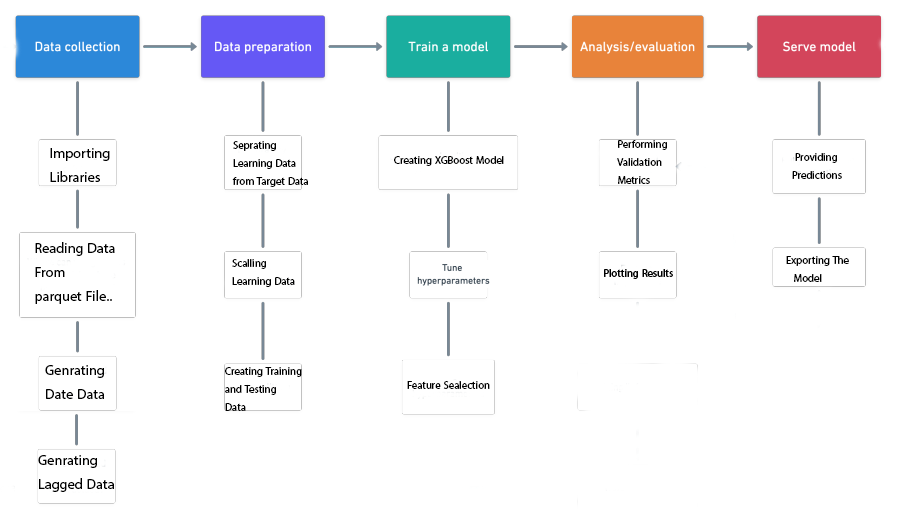
<style>
.page{position:relative;width:906px;height:520px;background:#ffffff}
.page>*{position:absolute;margin:0}
.t1{font:20px "MyriadArabic-Regular";color:#000000}
.t2{font:15px "MyriadArabic-Regular";color:#000000}
</style>
<div class="page">
<p class="t1" style="left:50px;top:148px;width:60px;height:34px;text-align:right">Importing<br>Libraries</p>
<p class="t2" style="left:232px;top:141px;width:76px;height:46px;text-align:right">Seprating<br> Learning Data<br> from Target Data</p>
<p class="t2" style="left:617px;top:140px;width:50px;height:44px;text-align:right">Performing<br>Validation<br>Metrics</p>
<p class="t2" style="left:394px;top:156px;width:110px;height:10px">Creating XGBoost Model</p>
<p class="t2" style="left:792px;top:153px;width:50px;height:26px;text-align:right">Providing <br>Predictions</p>
<p class="t1" style="left:35px;top:242px;width:80px;height:62px;text-align:right">Reading Data<br> From<br> ..parquet File</p>
<p class="t2" style="left:786px;top:256px;width:63px;height:26px;text-align:right">Exporting The<br>Model</p>
<p class="t2" style="left:232px;top:259px;width:63px;height:28px;text-align:right">Scalling<br>Learning Data</p>
<p class="t1" style="left:45px;top:365px;width:59px;height:34px;text-align:right">Genrating<br>Date Data</p>
<p class="t2" style="left:225px;top:367px;width:77px;height:44px;text-align:right">Creating Training<br>and Testing<br>Data</p>
<p class="t2" style="left:407px;top:381px;width:83px;height:8px">Feature Sealection</p>
<p class="t1" style="left:38px;top:455px;width:76px;height:37px;text-align:right">Genrating<br>Lagged Data</p>
</div>
